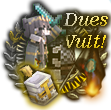
<style>
.page{position:relative;width:111px;height:110px}
.page>*{position:absolute;margin:0}
.t1{font:18.3px "News701BT-ItalicA"}
</style>
<div class="page">
<p class="t1" style="left:63px;top:13px;width:45px;height:35px">Dues<br>Vult!</p>
</div>
